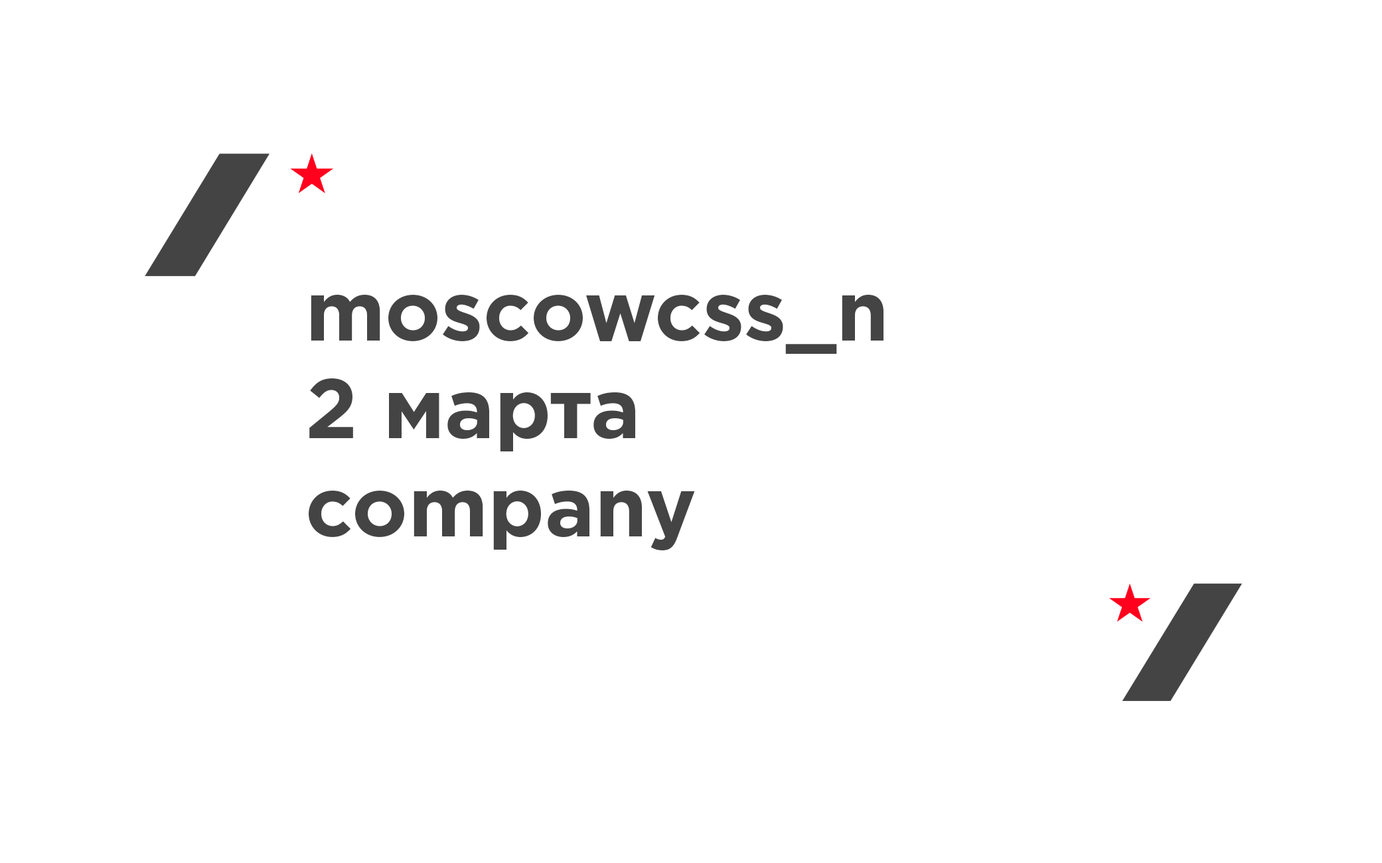
<style>
.page{position:relative;width:1382px;height:863px;background:#ffffff}
.page>*{position:absolute;margin:0}
.t1{font:84px/97.8px "GothamPro-Bold";color:#444444}
</style>
<div class="page">
<p class="t1" style="left:309px;top:295px;width:574px;height:255px">moscowcss_n<br>2 марта<br>company</p>
</div>
